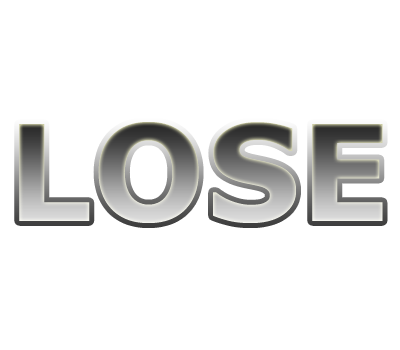
<style>
.page{position:relative;width:400px;height:350px;background:#ffffff}
.page>*{position:absolute;margin:0}
.t1{font:133.3px "Verdana-Bold"}
</style>
<div class="page">
<p class="t1" style="left:19px;top:122px;width:364px;height:101px">LOSE</p>
</div>
